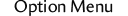
<style>
.page{position:relative;width:128px;height:16px;background:#ffffff}
.page>*{position:absolute;margin:0}
.t1{font:17.3px "Amira-Roman";color:#000000}
</style>
<div class="page">
<p class="t1" style="left:14px;top:0px;width:99px;height:16px;opacity:0.96">Option Menu</p>
</div>
